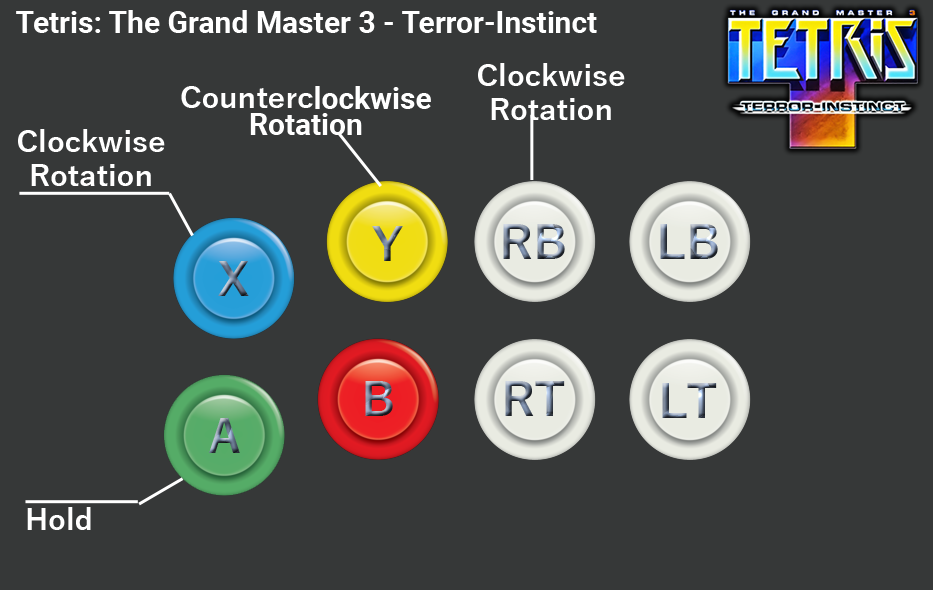
<style>
.page{position:relative;width:933px;height:590px;background:#363838}
.page>*{position:absolute;margin:0}
.t1{font:30px "Roboto-Bold";color:#ffffff}
.t2{font:30px/34px "YuGothic-Bold";color:#ffffff}
.t3{font:30px/26px "Roboto-Bold";color:#ffffff}
.t4{font:30px "YuGothic-Bold";color:#ffffff}
</style>
<div class="page">
<p class="t1" style="left:16px;top:10px;width:581px;height:23px">Tetris: The Grand Master 3 - Terror-Instinct</p>
<p class="t2" style="left:478px;top:63px;width:147px;height:57px;text-align:center">Clockwise<br>Rotation</p>
<p class="t3" style="left:181px;top:86px;width:250px;height:49px;text-align:center"><span class="t2">Counterc</span>lockwise<br>Rotation</p>
<p class="t2" style="left:18px;top:129px;width:147px;height:57px;text-align:center">Clockwise<br>Rotation</p>
<p class="t4" style="left:27px;top:507px;width:64px;height:23px">Hold</p>
</div>
